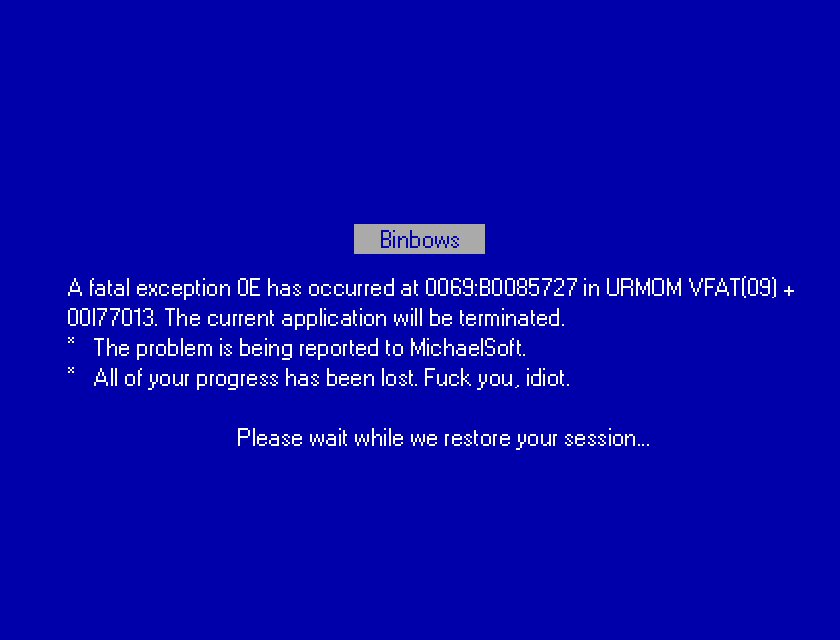
<style>
.page{position:relative;width:840px;height:640px;background:#0000aa}
.page>*{position:absolute;margin:0}
.t1{font:25px "W95FARegular";color:#0000aa}
.t2{font:25px "W95FARegular";color:#ffffff}
</style>
<div class="page">
<p class="t1" style="left:381px;top:230px;width:78px;height:18px">Binbows</p>
<p class="t2" style="left:68px;top:276px;width:726px;height:174px">A fatal exception 0E has occurred at 0069:B0085727 in URMOM VFAT(09) +<br>00I77013. The current application will be terminated.<br>The problem is being reported to MichaelSoft.<br>All of your progress has been lost. Fuck you, idiot.<br><br>Please wait while we restore your session...</p>
</div>
